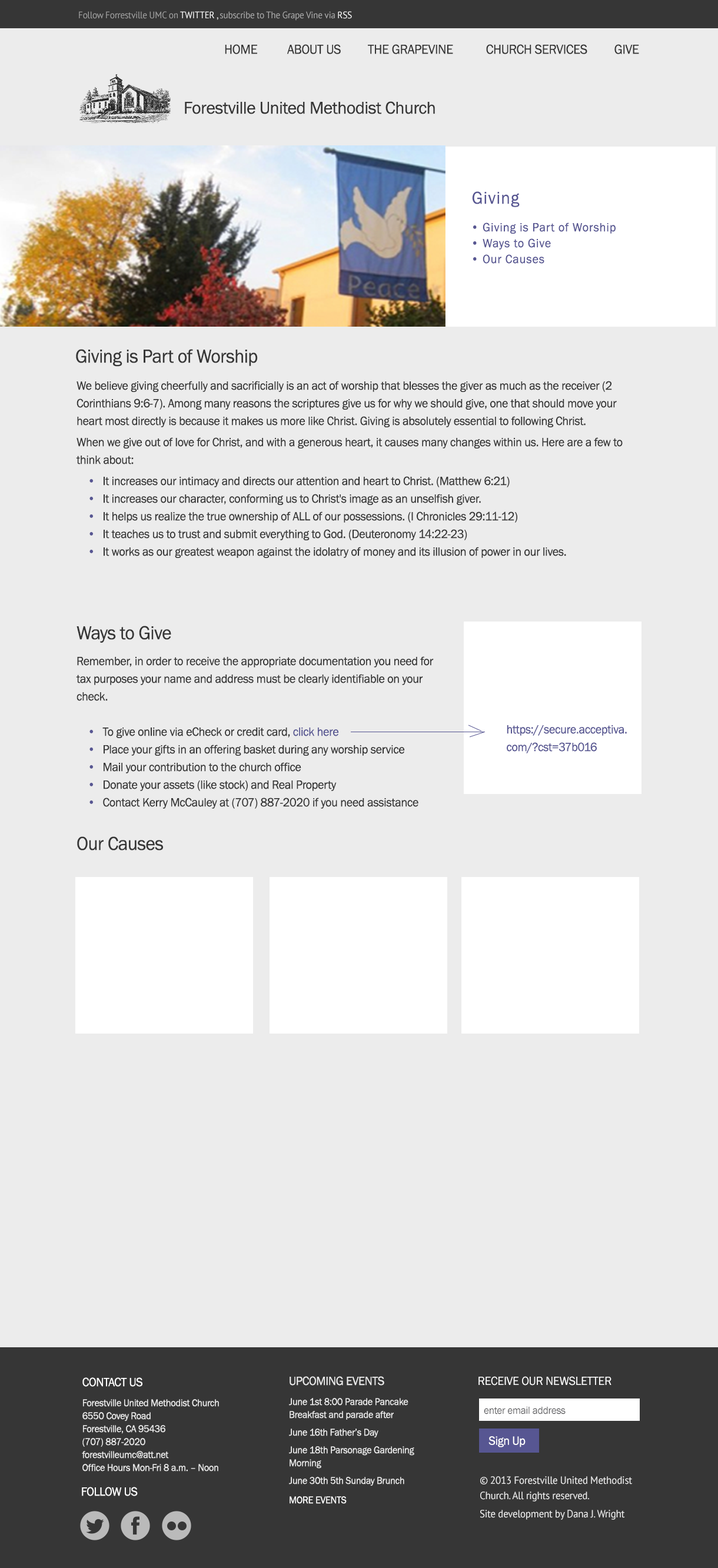
<style>
.page{position:relative;width:718px;height:1568px;background:#ececec}
.page>*{position:absolute;margin:0}
.t1{font:9.4px "PTSans-Regular";letter-spacing:-0.02em;color:#acacac;scale:0.96 1}
.t2{font:9.4px "PTSans-Regular";letter-spacing:-0.02em;color:#a1a1a1;scale:0.96 1}
.t3{font:9.4px "PTSans-Regular";letter-spacing:-0.02em;color:#ffffff;scale:0.96 1}
.t4{font:9.4px "PTSans-Regular";letter-spacing:-0.02em;color:#ebebeb;scale:0.96 1}
.t5{font:13.5px "FranklinGothic-Book";letter-spacing:-0.02em;color:#363636;scale:0.96 1}
.t6{font:17.7px "FranklinGothic-Book";letter-spacing:-0.02em;color:#363636}
.t7{font:17.7px "FranklinGothic-Book";letter-spacing:0.04em;color:#575692;scale:0.96 1}
.t8{font:12.4px/15.9px "FranklinGothic-Book";letter-spacing:0.04em;color:#575692;scale:0.96 1}
.t9{font:19.4px "FranklinGothic-Book";letter-spacing:-0.02em;color:#363636;scale:0.96 1}
.t10{font:12.4px/17.7px "FranklinGothic-Book";letter-spacing:-0.02em;color:#363636;scale:0.96 1}
.t11{font:12.4px/21.2px "FranklinGothic-Book";letter-spacing:-0.02em;color:#363636;scale:0.96 1}
.t12{font:12.4px/21.2px "FranklinGothic-Book";letter-spacing:0.04em;color:#575692;scale:0.96 1}
.t13{font:12.4px/17.7px "FranklinGothic-Book";letter-spacing:-0.02em;color:#575692;scale:0.96 1}
.t14{font:10px/12.9px "FranklinGothic-Book";letter-spacing:-0.02em;color:#ebebeb;scale:0.96 1}
.t15{font:12.4px/5.1px "FranklinGothic-Book";letter-spacing:-0.02em;color:#ffffff;scale:0.96 1}
.t16{font:10px/20px "FranklinGothic-Book";letter-spacing:-0.02em;color:#ebebeb;scale:0.96 1}
.t17{font:10px/17.7px "FranklinGothic-Book";letter-spacing:-0.02em;color:#ebebeb;scale:0.96 1}
.t18{font:12.4px/11.8px "FranklinGothic-Book";letter-spacing:-0.02em;color:#ebebeb;scale:0.96 1}
.t19{font:10px/19.4px "FranklinGothic-Book";letter-spacing:-0.02em;color:#ffffff;scale:0.96 1}
.t20{font:12.4px "FranklinGothic-Book";letter-spacing:-0.02em;color:#ffffff;scale:0.96 1}
.t21{font:10.6px "FranklinGothic-Book";letter-spacing:-0.02em;color:#565659;scale:0.96 1}
.t22{font:10.6px/15.7px "PTSans-Regular";letter-spacing:-0.02em;color:#ebebeb;scale:0.96 1}
.t23{font:10.6px/18px "PTSans-Regular";letter-spacing:-0.02em;color:#ebebeb;scale:0.96 1}
</style>
<div class="page">
<p class="t1" style="left:79px;top:11px;width:273px;height:10px"><span class="t2">Follow Forrestville UMC on </span><span class="t3">TWITTER</span><span class="t4"> , </span>subscribe to The Grape Vine via <span class="t3">RSS</span></p>
<p class="t5" style="left:225px;top:44px;width:414px;height:10px">HOME          ABOUT US         THE GRAPEVINE           CHURCH SERVICES         GIVE</p>
<p class="t6" style="left:185px;top:101px;width:250px;height:13px">Forestville United Methodist Church</p>
<p class="t7" style="left:472px;top:191px;width:48px;height:16px">Giving</p>
<p class="t8" style="left:473px;top:222px;width:143px;height:42px">• Giving is Part of Worship<br>• Ways to Give<br>• Our Causes</p>
<p class="t9" style="left:76px;top:349px;width:182px;height:18px">Giving is Part of Worship</p>
<p class="t10" style="left:76px;top:381px;width:547px;height:177px">We believe giving cheerfully and sacrificially is an act of worship that blesses the giver as much as the receiver (2 Corinthians 9:6-7). Among many reasons the scriptures give us for why we should give, one that should move your heart most directly is because it makes us more like Christ. Giving is absolutely essential to following Christ.<br><span class="t11">When we give out of love for Christ, and with a generous heart, it causes many changes within us. Here are a few to </span>think about:<br>    <span class="t12">•  </span><span class="t11">It increases our intimacy and directs our attention and heart to Christ. (Matthew 6:21)<br>    </span><span class="t8">•  </span>It increases our character, conforming us to Christ's image as an unselfish giver.<br>    <span class="t8">•  </span>It helps us realize the true ownership of ALL of our possessions. (I Chronicles 29:11-12)<br>    <span class="t8">•  </span>It teaches us to trust and submit everything to God. (Deuteronomy 14:22-23)<br>    <span class="t8">•  </span>It works as our greatest weapon against the idolatry of money and its illusion of power in our lives.</p>
<p class="t9" style="left:77px;top:626px;width:94px;height:17px">Ways to Give</p>
<p class="t10" style="left:76px;top:656px;width:358px;height:153px">Remember, in order to receive the appropriate documentation you need for tax purposes your name and address must be clearly identifiable on your check.<br><br>    <span class="t8">•  </span>To give online via eCheck or credit card, <span class="t13">click here<br>    </span><span class="t8">•  </span>Place your gifts in an offering basket during any worship service<br>    <span class="t8">•  </span>Mail your contribution to the church office<br>    <span class="t8">•  </span>Donate your assets (like stock) and Real Property<br>    <span class="t8">•  </span>Contact Kerry McCauley at (707) 887-2020 if you need assistance</p>
<p class="t13" style="left:507px;top:725px;width:120px;height:28px">https://secure.acceptiva.com/?cst=37b016</p>
<p class="t9" style="left:77px;top:836px;width:86px;height:15px">Our Causes</p>
<p class="t14" style="left:82px;top:1377px;width:137px;height:94px"><span class="t15">CONTACT US<br></span><span class="t16">Forestville United Methodist Church<br></span>6550 Covey Road<br>Forestville, CA 95436<br>(707) 887-2020<br>forestvilleumc@att.net<br>Office Hours Mon-Fri 8 a.m. – Noon</p>
<p class="t17" style="left:289px;top:1376px;width:125px;height:128px"><span class="t18">UPCOMING EVENTS<br></span><span class="t16">June 1st 8:00 Parade Pancake </span><span class="t14">Breakfast and parade after<br></span>June 16th Father’s Day<br>June 18th Parsonage Gardening<br><span class="t14">Morning<br></span>June 30th 5th Sunday Brunch<br><span class="t19">MORE EVENTS</span></p>
<p class="t20" style="left:479px;top:1376px;width:133px;height:10px">RECEIVE OUR NEWSLETTER</p>
<p class="t21" style="left:484px;top:1407px;width:82px;height:7px">enter email address</p>
<p class="t20" style="left:489px;top:1436px;width:37px;height:11px">Sign Up</p>
<p class="t22" style="left:480px;top:1476px;width:152px;height:44px">© 2013 Forestville United Methodist Church. All rights reserved.  <br><span class="t23">Site development by Dana J. Wright</span></p>
<p class="t20" style="left:82px;top:1487px;width:56px;height:9px">FOLLOW US</p>
</div>
